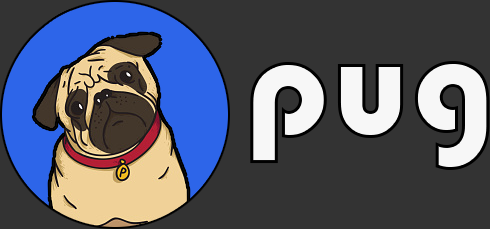
<style>
.page{position:relative;width:490px;height:229px;background:#333333}
.page>*{position:absolute;margin:0}
.t1{font:150px "Bauhaus93";color:#f7f7f7}
</style>
<div class="page">
<p class="t1" style="left:250px;top:61px;width:240px;height:109px">pug</p>
</div>
